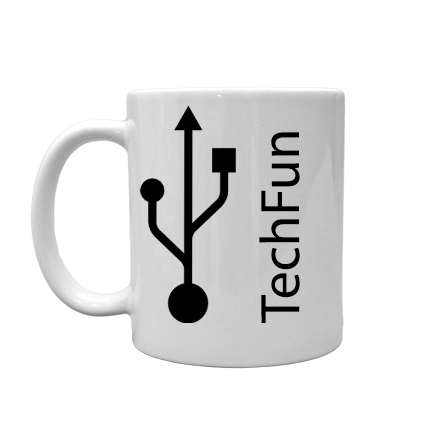
<style>
.page{position:relative;width:436px;height:427px;background:#ffffff}
.page>*{position:absolute;margin:0}
.t1{font:55.7px "MyriadPro-Regular";color:#000000}
</style>
<div class="page">
<p class="t1" style="left:259px;top:132px;width:41px;height:191px;rotate:-90deg">TechFun</p>
</div>
